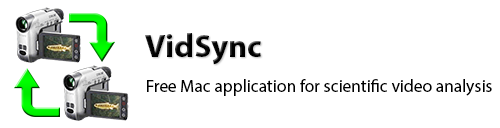
<style>
.page{position:relative;width:500px;height:128px;background:#ffffff}
.page>*{position:absolute;margin:0}
.t1{font:32.7px "MyriadPro-Bold";color:#000000}
.t2{font:17.4px "MyriadPro-Regular";color:#000000}
</style>
<div class="page">
<p class="t1" style="left:145px;top:33px;width:116px;height:32px">VidSync</p>
<p class="t2" style="left:147px;top:79px;width:345px;height:17px">Free Mac application for scientific video analysis</p>
</div>
